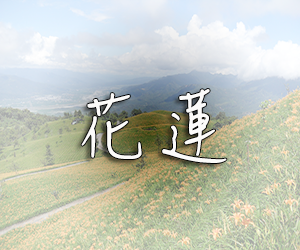
<style>
.page{position:relative;width:300px;height:250px}
.page>*{position:absolute;margin:0}
.t1{font:82.7px "DFHsiu-W3-WIN-BF";color:#fcfbfa}
</style>
<div class="page">
<p class="t1" style="left:81px;top:89px;width:146px;height:74px">花蓮</p>
</div>
